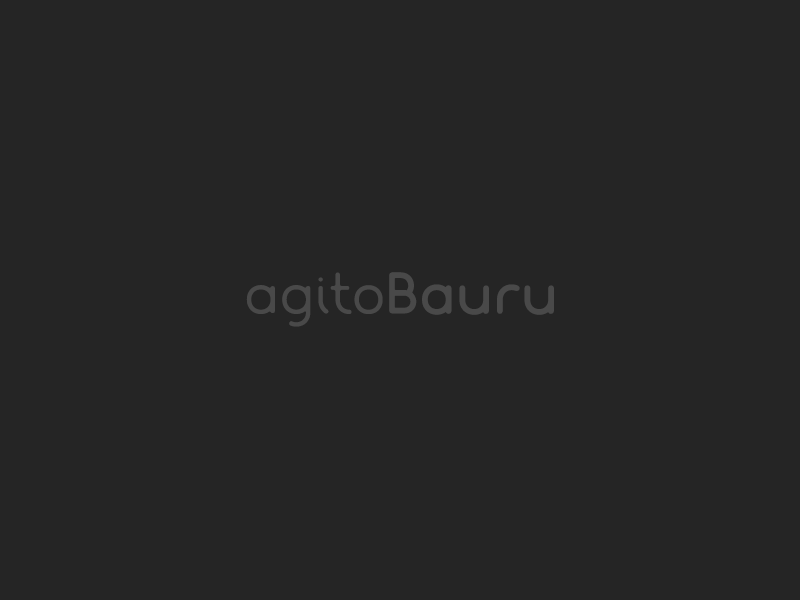
<style>
.page{position:relative;width:800px;height:600px;background:#252525}
.page>*{position:absolute;margin:0}
.t1{font:50px "Lachata";color:#494949}
.t2{font:50px "Lachata";color:#494949;font-weight:bold}
</style>
<div class="page">
<p class="t1" style="left:246px;top:272px;width:308px;height:55px">agito<span class="t2">Bauru</span></p>
</div>
